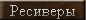
<style>
.page{position:relative;width:86px;height:20px}
.page>*{position:absolute;margin:0}
.t1{font:16px "TimesNewRomanPSMT";color:#c5c5c5}
</style>
<div class="page">
<p class="t1" style="left:10px;top:5px;width:65px;height:14px">Ресиверы</p>
</div>
